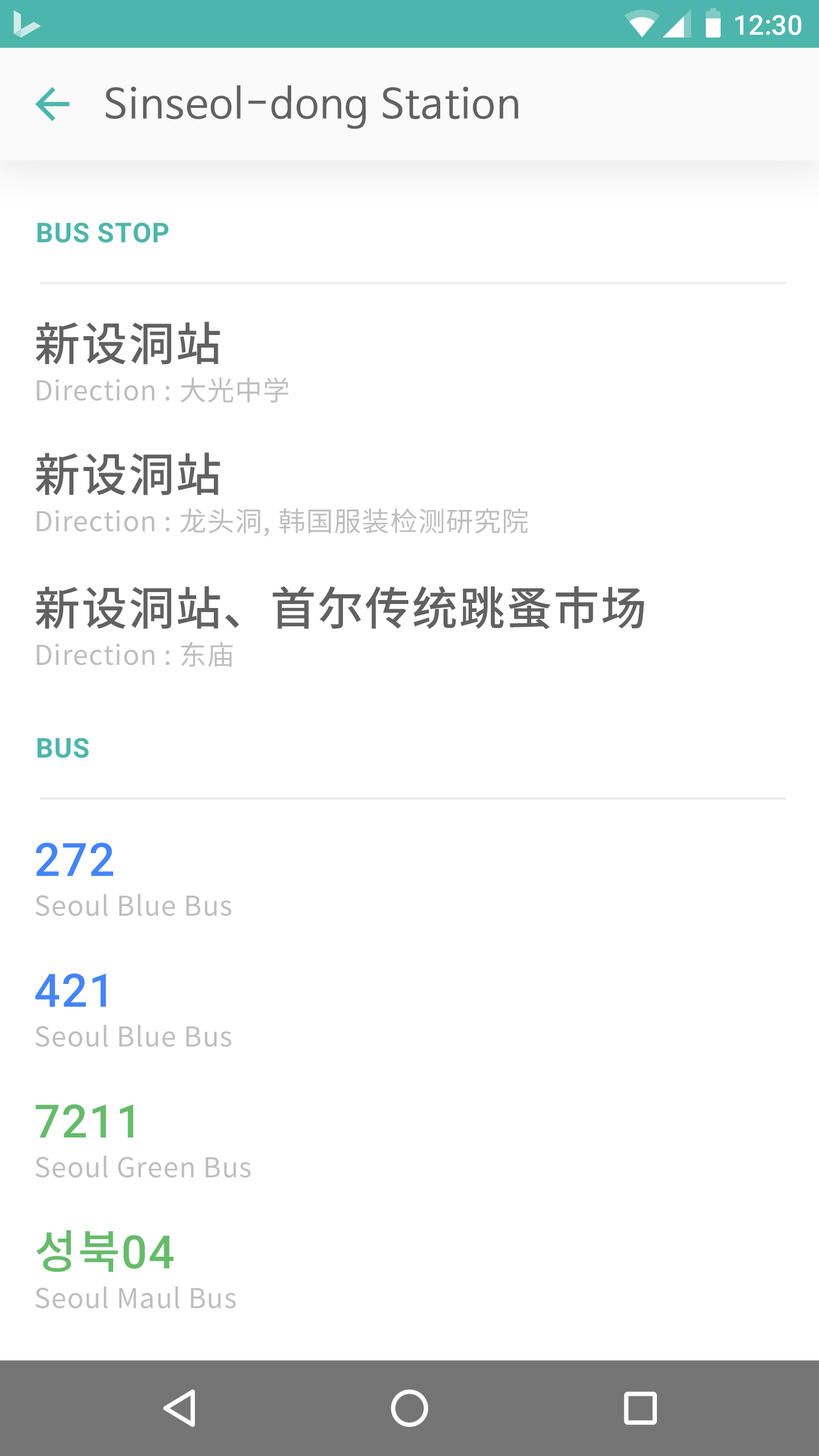
<style>
.page{position:relative;width:819px;height:1456px;background:#ffffff}
.page>*{position:absolute;margin:0}
.t1{font:27.3px "Roboto-Medium";color:#ffffff}
.t2{font:40.9px "NanumBarunGothic";letter-spacing:0.025em;color:#616161}
.t3{font:27.3px "Roboto-Bold";letter-spacing:0.025em;color:#4db6ac}
.t4{font:46.1px "NotoSansCJKkr-Medium";letter-spacing:0.025em;color:#616161}
.t5{font:27.3px "NotoSansCJKkr-Regular";letter-spacing:0.025em;color:#bdbdbd}
.t6{font:46.1px "Roboto-Medium";letter-spacing:0.025em;color:#4484f6}
.t7{font:46.1px "Roboto-Medium";letter-spacing:0.025em;color:#66bb6a}
.t8{font:46.1px "NotoSansCJKkr-Medium";letter-spacing:0.025em;color:#66bb6a}
</style>
<div class="page">
<p class="t1" style="left:735px;top:15px;width:66px;height:20px">12:30</p>
<p class="t2" style="left:106px;top:85px;width:412px;height:44px">Sinseol-dong Station</p>
<p class="t3" style="left:38px;top:222px;width:131px;height:21px">BUS STOP</p>
<p class="t4" style="left:35px;top:321px;width:185px;height:44px">新设洞站</p>
<p class="t5" style="left:36px;top:377px;width:252px;height:26px">Direction : 大光中学</p>
<p class="t4" style="left:35px;top:452px;width:185px;height:43px">新设洞站</p>
<p class="t5" style="left:36px;top:508px;width:492px;height:28px">Direction : 龙头洞, 韩国服装检测研究院</p>
<p class="t4" style="left:35px;top:586px;width:609px;height:44px">新设洞站、首尔传统跳蚤市场</p>
<p class="t5" style="left:36px;top:642px;width:197px;height:25px">Direction : 东庙</p>
<p class="t3" style="left:38px;top:738px;width:51px;height:20px">BUS</p>
<p class="t6" style="left:36px;top:842px;width:77px;height:34px">272</p>
<p class="t5" style="left:35px;top:893px;width:196px;height:23px">Seoul Blue Bus</p>
<p class="t6" style="left:35px;top:973px;width:71px;height:34px">421</p>
<p class="t5" style="left:35px;top:1024px;width:196px;height:23px">Seoul Blue Bus</p>
<p class="t7" style="left:35px;top:1104px;width:99px;height:33px">7211</p>
<p class="t5" style="left:35px;top:1155px;width:216px;height:23px">Seoul Green Bus</p>
<p class="t8" style="left:36px;top:1230px;width:137px;height:42px">성북<span class="t7">04</span></p>
<p class="t5" style="left:35px;top:1286px;width:201px;height:23px">Seoul Maul Bus</p>
</div>
